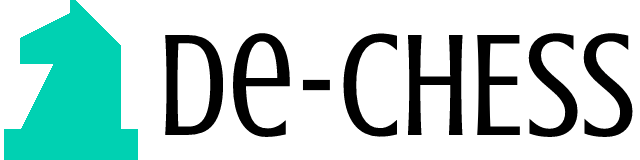
<style>
.page{position:relative;width:640px;height:160px;background:#ffffff}
.page>*{position:absolute;margin:0}
.t1{font:149px "Crushed-Regular";color:#000000}
</style>
<div class="page">
<p class="t1" style="left:165px;top:33px;width:468px;height:104px">De-CHESS</p>
</div>
